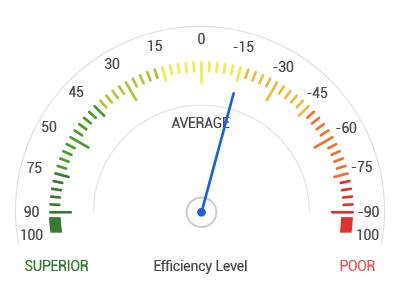
<style>
.page{position:relative;width:400px;height:294px;background:#ffffff}
.page>*{position:absolute;margin:0}
.t1{font:13.6px "Roboto-Regular";color:#4d4d50}
.t2{font:13.6px "Roboto-Regular";color:#4d4d50;text-transform:uppercase}
.t3{font:13.6px "Roboto-Regular";color:#367b34;text-transform:uppercase}
.t4{font:13.6px "Roboto-Regular";color:#e55d58;text-transform:uppercase}
</style>
<div class="page">
<p class="t1" style="left:148px;top:40px;width:14px;height:11px">15</p>
<p class="t1" style="left:198px;top:33px;width:7px;height:11px">0</p>
<p class="t1" style="left:233px;top:41px;width:21px;height:11px">-15</p>
<p class="t1" style="left:105px;top:58px;width:15px;height:11px">30</p>
<p class="t1" style="left:273px;top:61px;width:21px;height:11px">-30</p>
<p class="t1" style="left:68px;top:86px;width:16px;height:11px">45</p>
<p class="t1" style="left:307px;top:87px;width:21px;height:11px">-45</p>
<p class="t1" style="left:42px;top:121px;width:15px;height:11px">50</p>
<p class="t2" style="left:171px;top:117px;width:59px;height:11px">AVERAGE</p>
<p class="t1" style="left:336px;top:122px;width:21px;height:11px">-60</p>
<p class="t1" style="left:351px;top:161px;width:21px;height:11px">-75</p>
<p class="t1" style="left:27px;top:162px;width:15px;height:11px">75</p>
<p class="t1" style="left:24px;top:206px;width:15px;height:11px">90</p>
<p class="t1" style="left:358px;top:206px;width:21px;height:11px">-90</p>
<p class="t1" style="left:21px;top:229px;width:22px;height:11px">100</p>
<p class="t1" style="left:357px;top:229px;width:22px;height:11px">100</p>
<p class="t3" style="left:25px;top:260px;width:64px;height:11px">Superior</p>
<p class="t1" style="left:154px;top:260px;width:93px;height:14px">Efficiency Level</p>
<p class="t4" style="left:340px;top:260px;width:35px;height:11px">Poor</p>
</div>
